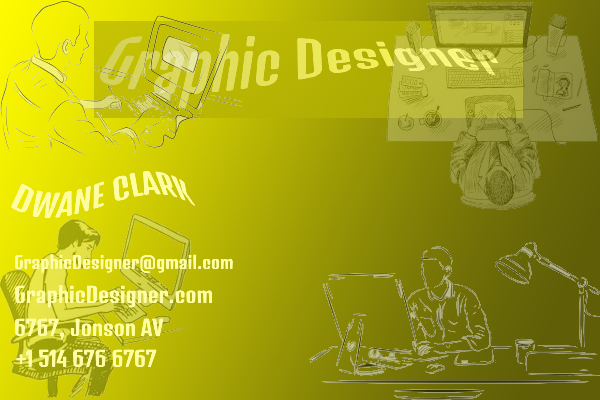
<style>
.page{position:relative;width:600px;height:400px}
.page>*{position:absolute;margin:0}
.t1{font:50px "DenkOne-Regular";color:#e2e05c}
.t2{font:29px "DenkOne-Regular";color:#fffda4}
.t3{font:17px "DenkOne-Regular";color:#fffda4}
.t4{font:21px "DenkOne-Regular";color:#fffda4}
</style>
<div class="page">
<p class="t1" style="left:99px;top:33px;width:400px;height:76px">Graphic Designer</p>
<p class="t2" style="left:11px;top:171px;width:185px;height:47px">DWANE CLARK</p>
<p class="t3" style="left:15px;top:254px;width:218px;height:19px">GraphicDesigner@gmail.com</p>
<p class="t4" style="left:15px;top:285px;width:198px;height:23px">GraphicDesigner.com</p>
<p class="t4" style="left:15px;top:318px;width:149px;height:22px">6767, Jonson AV</p>
<p class="t4" style="left:16px;top:349px;width:141px;height:19px">+1 514 676 6767</p>
</div>
